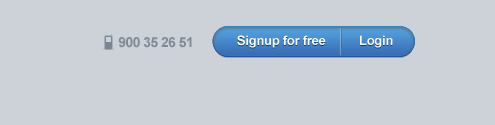
<style>
.page{position:relative;width:495px;height:125px;background:#cdd2d8}
.page>*{position:absolute;margin:0}
.t1{font:14px "Arial-BoldMT";letter-spacing:-0.04em;color:#818a95}
.t2{font:13px "Arial-BoldMT";letter-spacing:-0.02em;color:#ffffff}
</style>
<div class="page">
<p class="t1" style="left:118px;top:37px;width:74px;height:11px">900 35 26 51</p>
<p class="t2" style="left:237px;top:35px;width:156px;height:13px">Signup for free          Login</p>
</div>
